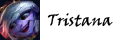
<style>
.page{position:relative;width:140px;height:40px;background:#ffffff}
.page>*{position:absolute;margin:0}
.t1{font:16px "VinerHandITC";color:#000000}
</style>
<div class="page">
<p class="t1" style="left:47px;top:13px;width:66px;height:14px">Tristana</p>
</div>
